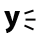
<style>
.page{position:relative;width:39px;height:37px;background:#ffffff}
.page>*{position:absolute;margin:0}
.t1{font:30px "MyriadWebPro-Bold";color:#040404}
</style>
<div class="page">
<p class="t1" style="left:4px;top:11px;width:16px;height:22px">y</p>
</div>
